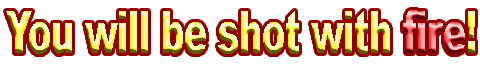
<style>
.page{position:relative;width:480px;height:64px;background:#ffffff}
.page>*{position:absolute;margin:0}
.t1{font:57.8px "Arial-Black";scale:0.59 1}
</style>
<div class="page">
<p class="t1" style="left:6px;top:10px;width:469px;height:44px">You will be shot with fire!</p>
</div>
